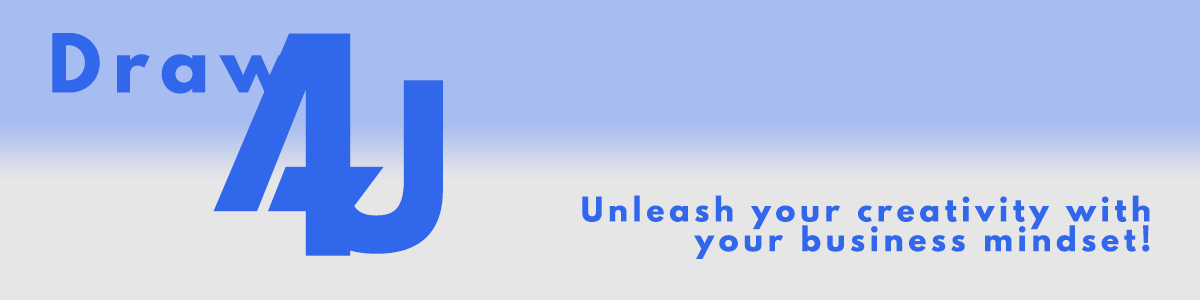
<style>
.page{position:relative;width:1200px;height:300px;background:#a7bcf0}
.page>*{position:absolute;margin:0}
.t1{font:72px "LeagueSpartan-Bold";letter-spacing:0.16em;color:#3167eb}
.t2{font:227.3px "GearsofPeace";letter-spacing:0.16em;color:#3167eb}
.t3{font:206.3px "LeagueSpartan-Bold";letter-spacing:0.16em;color:#3167eb}
.t4{font:30px/29.7px "LeagueSpartan-Bold";letter-spacing:0.16em;color:#3167eb}
</style>
<div class="page">
<p class="t1" style="left:52px;top:33px;width:242px;height:61px">Draw</p>
<p class="t2" style="left:213px;top:33px;width:171px;height:223px">4</p>
<p class="t3" style="left:309px;top:80px;width:134px;height:174px">U</p>
<p class="t4" style="left:582px;top:195px;width:568px;height:64px;text-align:right">Unleash your creativity with<br>your business mindset!</p>
</div>
